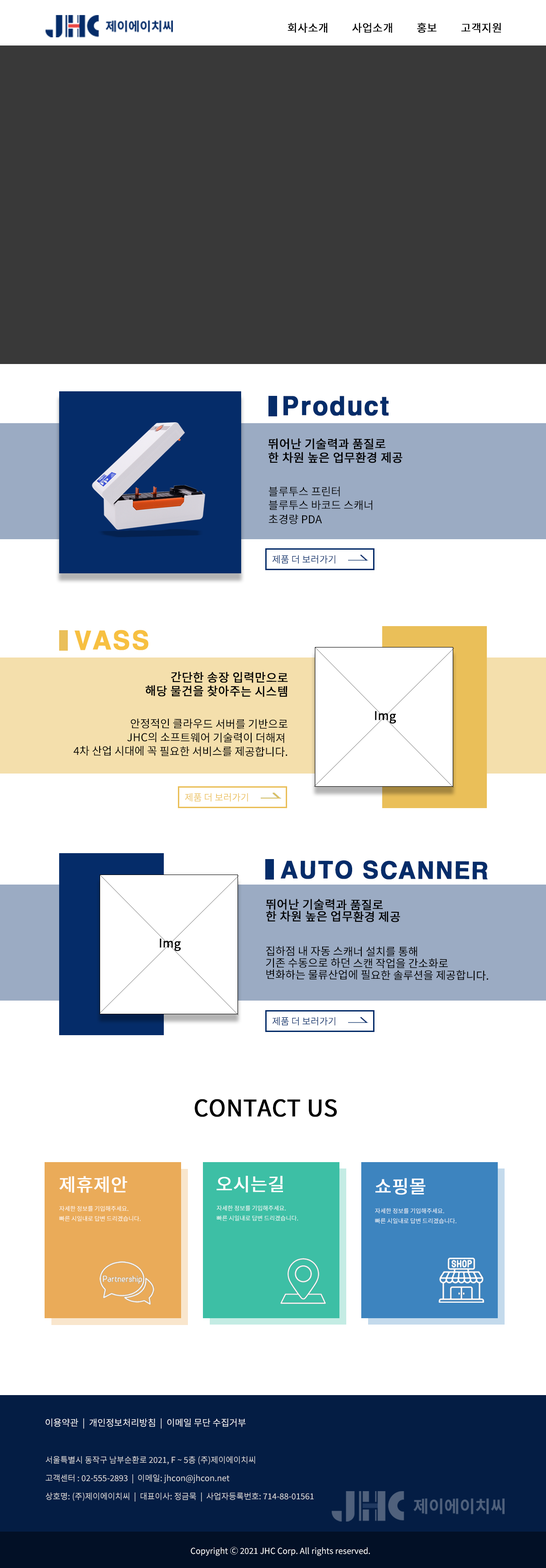
<style>
.page{position:relative;width:546px;height:1568px;background:#ffffff}
.page>*{position:absolute;margin:0}
.t1{font:10.9px "NotoSansKR-Regular";color:#000000;font-weight:bold}
.t2{font:24.8px "H2gtrE";color:#052c69;font-weight:bold}
.t3{font:11.8px/13.8px "NotoSansKR-Regular";color:#000000;font-weight:bold}
.t4{font:10.9px/13.8px "NotoSansKR-Regular";color:#000000}
.t5{font:9.4px "NotoSansKR-Regular";color:#052c69}
.t6{font:24.6px "H2gtrE";color:#f7c041;font-weight:bold}
.t7{font:11.9px "NotoSansKR-Regular";color:#000000;font-weight:bold}
.t8{font:9.4px "NotoSansKR-Regular";color:#eabf59}
.t9{font:22.8px "H2gtrE";color:#052c69;font-weight:bold}
.t10{font:11.8px/11.8px "NotoSansKR-Regular";color:#000000;font-weight:bold}
.t11{font:10.9px/11.8px "NotoSansKR-Regular";color:#000000}
.t12{font:22.8px "NotoSansKR-Regular";color:#000000;font-weight:bold}
.t13{font:18.2px "NotoSansKR-Regular";color:#ffffff;font-weight:bold}
.t14{font:5.9px/10.2px "NotoSansKR-Regular";color:#ffffff}
.t15{font:9.1px "NotoSansKR-Regular";color:#ffffff}
.t16{font:8.2px/18.2px "NotoSansKR-Regular";color:#dddddd}
.t17{font:8.2px "NotoSansKR-Regular";color:#ffffff}
</style>
<div class="page">
<p class="t1" style="left:288px;top:23px;width:40px;height:10px">회사소개</p>
<p class="t1" style="left:352px;top:23px;width:40px;height:10px">사업소개</p>
<p class="t1" style="left:417px;top:23px;width:20px;height:10px">홍보</p>
<p class="t1" style="left:461px;top:23px;width:40px;height:10px">고객지원</p>
<p class="t2" style="left:283px;top:396px;width:106px;height:20px">Product</p>
<p class="t3" style="left:268px;top:438px;width:135px;height:25px">뛰어난 기술력과 품질로<br>한 차원 높은 업무환경 제공</p>
<p class="t4" style="left:268px;top:486px;width:104px;height:38px">블루투스 프린터<br>블루투스 바코드 스캐너<br>초경량 PDA</p>
<p class="t5" style="left:272px;top:555px;width:63px;height:9px">제품 더 보러가기</p>
<p class="t6" style="left:75px;top:630px;width:73px;height:20px">VASS</p>
<p class="t3" style="left:146px;top:671px;width:142px;height:26px;text-align:right">간단한 송장 입력만으로<br>해당 물건을 찾아주는 시스템</p>
<p class="t7" style="left:375px;top:711px;width:21px;height:12px">Img</p>
<p class="t4" style="left:73px;top:718px;width:215px;height:39px;text-align:right">안정적인 클라우드 서버를 기반으로<br>JHC의 소프트웨어 기술력이 더해져 <br>4차 산업 시대에 꼭 필요한 서비스를 제공합니다.</p>
<p class="t8" style="left:185px;top:793px;width:63px;height:9px">제품 더 보러가기</p>
<p class="t9" style="left:281px;top:860px;width:207px;height:20px">AUTO SCANNER</p>
<p class="t10" style="left:266px;top:899px;width:134px;height:23px">뛰어난 기술력과 품질로<br>한 차원 높은 업무환경 제공</p>
<p class="t7" style="left:160px;top:938px;width:21px;height:13px">Img</p>
<p class="t11" style="left:266px;top:946px;width:222px;height:35px">집하점 내 자동 스캐너 설치를 통해<br>기존 수동으로 하던 스캔 작업을 간소화로<br>변화하는 물류산업에 필요한 솔루션을 제공합니다.</p>
<p class="t5" style="left:272px;top:1017px;width:63px;height:9px">제품 더 보러가기</p>
<p class="t12" style="left:195px;top:1099px;width:142px;height:18px">CONTACT US</p>
<p class="t13" style="left:59px;top:1176px;width:68px;height:17px">제휴제안</p>
<p class="t13" style="left:217px;top:1176px;width:66px;height:17px">오시는길</p>
<p class="t13" style="left:375px;top:1178px;width:50px;height:17px">쇼핑몰</p>
<p class="t14" style="left:59px;top:1206px;width:82px;height:15px">자세한 정보를 기입해주세요.<br>빠른 시일내로 답변 드리겠습니다.</p>
<p class="t14" style="left:217px;top:1205px;width:81px;height:16px">자세한 정보를 기입해주세요.<br>빠른 시일내로 답변 드리겠습니다.</p>
<p class="t14" style="left:375px;top:1208px;width:81px;height:16px">자세한 정보를 기입해주세요.<br>빠른 시일내로 답변 드리겠습니다.</p>
<p class="t15" style="left:46px;top:1418px;width:200px;height:11px">이용약관  |  개인정보처리방침  |  이메일 무단 수집거부</p>
<p class="t16" style="left:46px;top:1456px;width:268px;height:46px">서울특별시 동작구 남부순환로 2021, F ~ 5층 (주)제이에이치씨<br>고객센터 : 02-555-2893  |  이메일: jhcon@jhcon.net<br>상호명: (주)제이에이치씨  |  대표이사: 정금묵  |  사업자등록번호: 714-88-01561</p>
<p class="t17" style="left:191px;top:1547px;width:179px;height:9px">Copyright Ⓒ 2021 JHC Corp. All rights reserved.</p>
</div>
